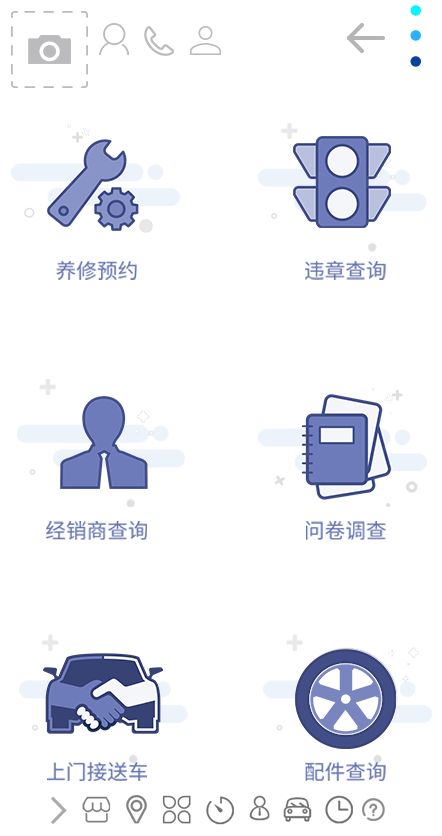
<style>
.page{position:relative;width:442px;height:836px;background:#ffffff}
.page>*{position:absolute;margin:0}
.t1{font:20.5px "SourceHanSansCN-Regular";color:#6472b0}
</style>
<div class="page">
<p class="t1" style="left:56px;top:261px;width:81px;height:19px">养修预约</p>
<p class="t1" style="left:305px;top:261px;width:81px;height:19px">违章查询</p>
<p class="t1" style="left:46px;top:521px;width:101px;height:19px">经销商查询</p>
<p class="t1" style="left:306px;top:521px;width:80px;height:19px">问卷调查</p>
<p class="t1" style="left:47px;top:762px;width:100px;height:19px">上门接送车</p>
<p class="t1" style="left:305px;top:762px;width:81px;height:19px">配件查询</p>
</div>
